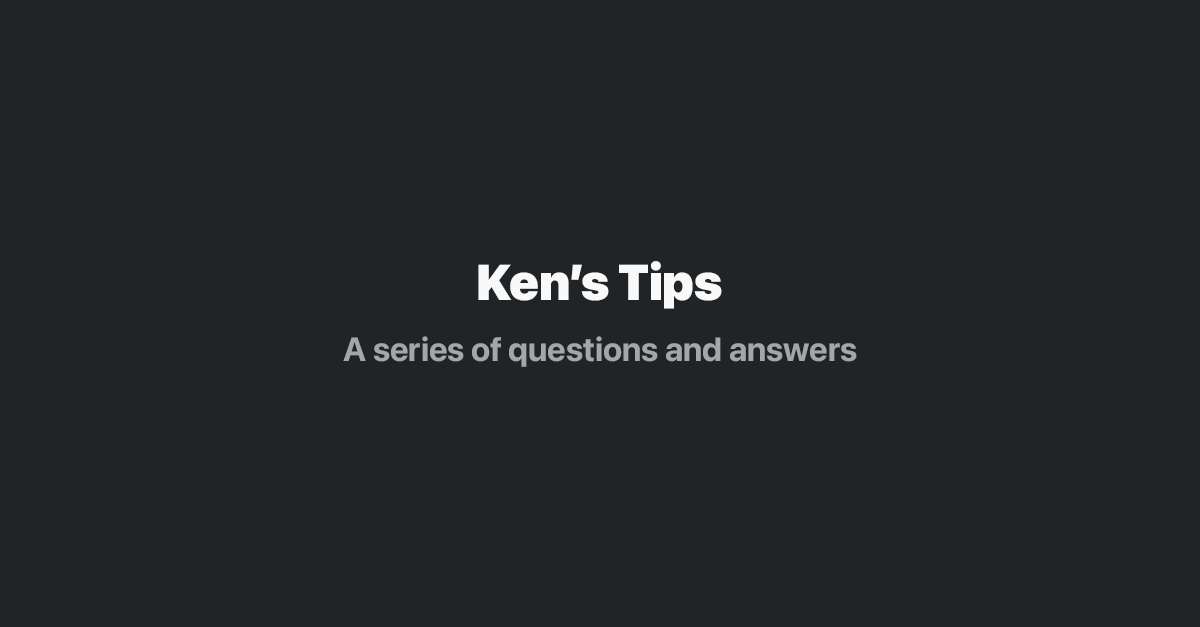
<style>
.page{position:relative;width:1200px;height:627px;background:#212426}
.page>*{position:absolute;margin:0}
.t1{font:50px "SFProDisplay-Black";color:#f9f9f9}
.t2{font:33.3px "SFProDisplay-Bold";color:#a5a6a6}
</style>
<div class="page">
<p class="t1" style="left:478px;top:261px;width:244px;height:48px">Ken’s Tips</p>
<p class="t2" style="left:343px;top:336px;width:514px;height:31px">A series of questions and answers</p>
</div>
